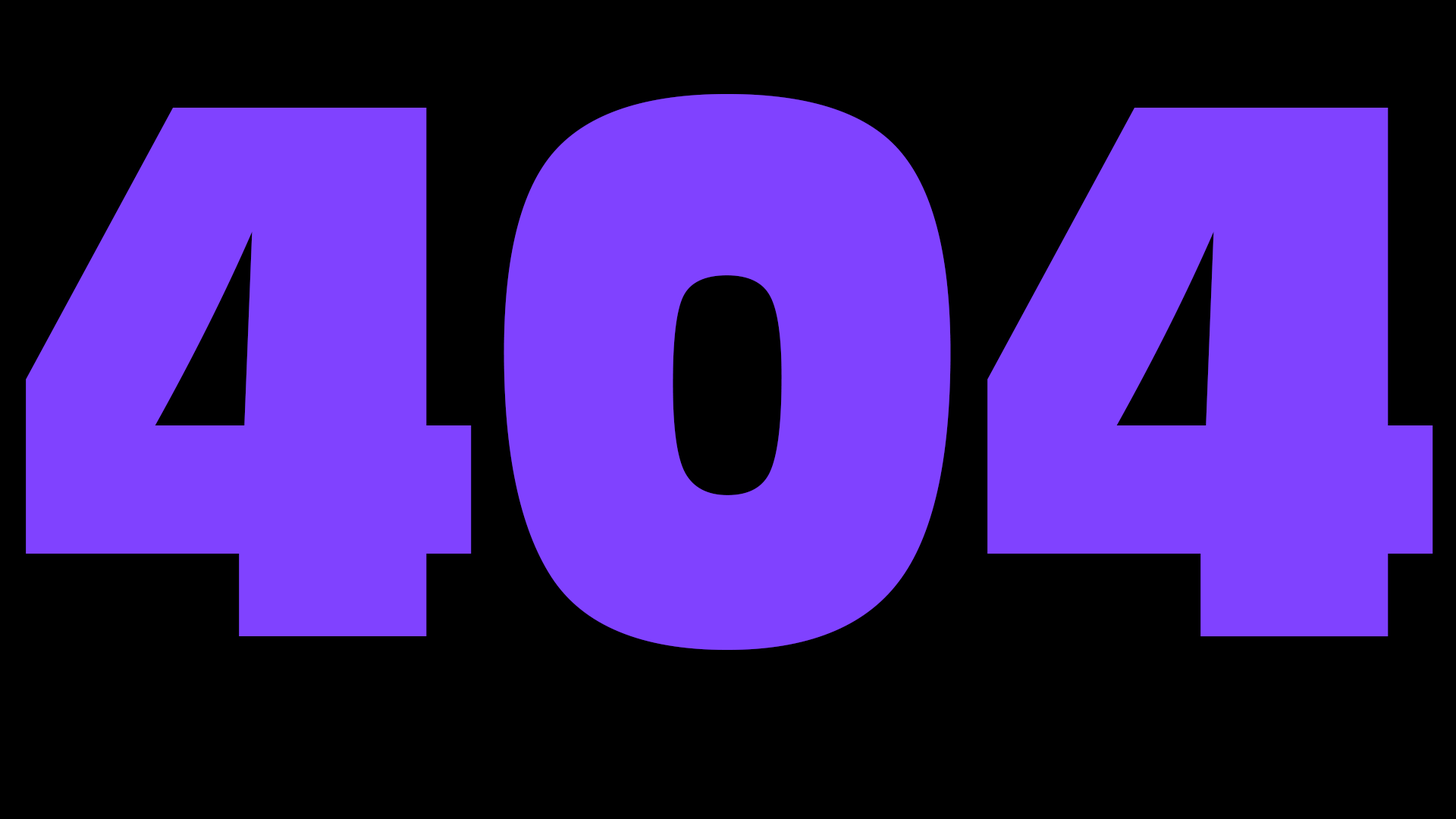
<style>
.page{position:relative;width:1456px;height:819px;background:#000000}
.page>*{position:absolute;margin:0}
.t1{font:744.1px "AntiqueOlive-Compact";color:#8042ff;scale:0.92 1}
</style>
<div class="page">
<p class="t1" style="left:26px;top:94px;width:1407px;height:556px">404</p>
</div>
